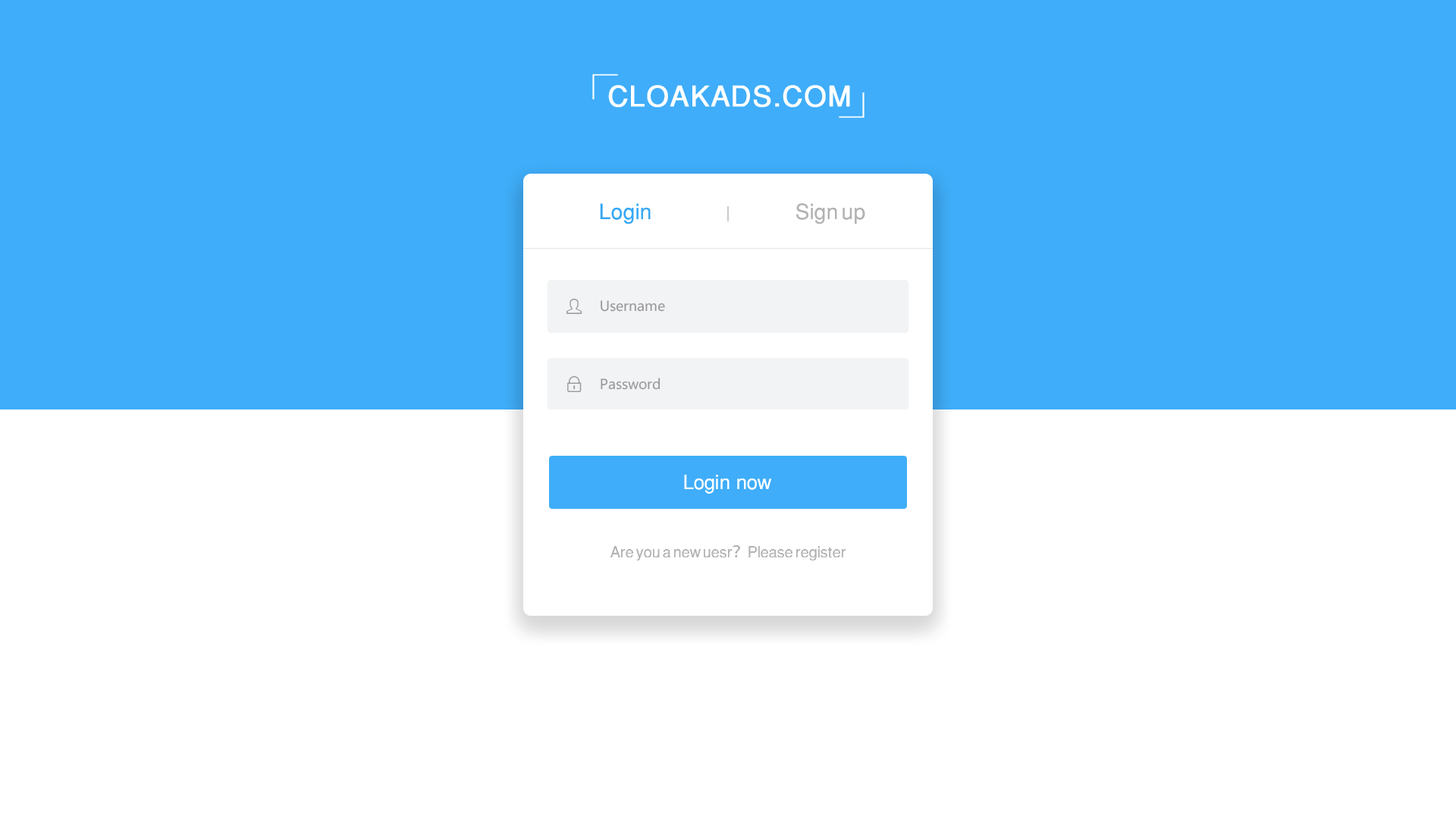
<style>
.page{position:relative;width:1456px;height:819px;background:#ffffff}
.page>*{position:absolute;margin:0}
.t1{font:28.5px "SansSerif";letter-spacing:0.02em;color:#ffffff;font-weight:bold}
.t2{font:21.2px "SansSerif";color:#38a8f5}
.t3{font:21.2px "SansSerif";color:#b3b3b3}
.t4{font:13.7px "MicrosoftYaHei";color:#999999}
.t5{font:13.7px "MicrosoftYaHei";color:#999999;text-transform:uppercase}
.t6{font:19.7px "SansSerif";color:#ffffff}
.t7{font:15.2px "SansSerif";color:#b3b3b3}
.t8{font:15.2px "AdobeHeitiStd-Regular";color:#b3b3b3}
</style>
<div class="page">
<p class="t1" style="left:608px;top:85px;width:242px;height:23px">CLOAKADS.COM</p>
<p class="t2" style="left:600px;top:203px;width:51px;height:21px">Login</p>
<p class="t3" style="left:796px;top:203px;width:69px;height:21px">Sign up</p>
<p class="t4" style="left:601px;top:300px;width:64px;height:12px"><span class="t5">U</span>sername</p>
<p class="t4" style="left:601px;top:378px;width:59px;height:12px">Password</p>
<p class="t6" style="left:684px;top:475px;width:87px;height:19px">Login  now</p>
<p class="t7" style="left:610px;top:545px;width:236px;height:15px">Are you a new uesr<span class="t8">？</span>Please register</p>
</div>
